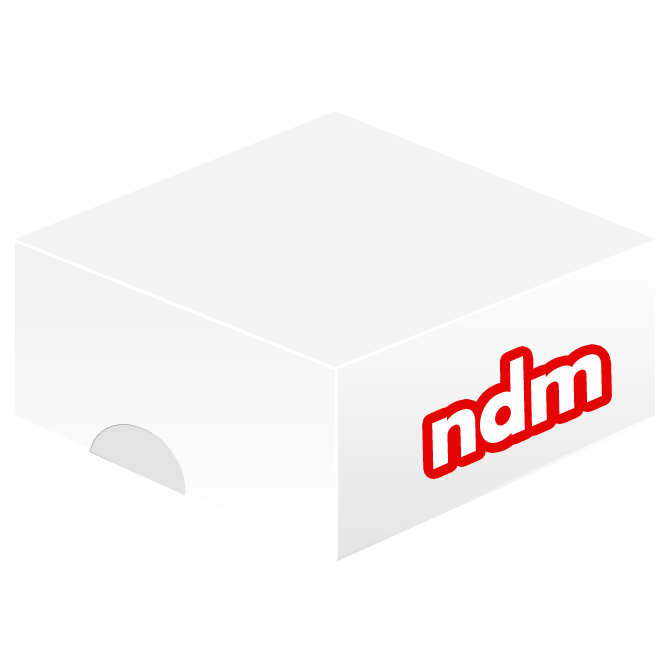
<style>
.page{position:relative;width:670px;height:670px;background:#ffffff}
.page>*{position:absolute;margin:0}
.t1{font:99.1px "SansSerifBldFLF";color:#ffffff;scale:0.93 1}
</style>
<div class="page">
<p class="t1" style="left:432px;top:354px;width:170px;height:116px;rotate:-24deg">ndm</p>
</div>
